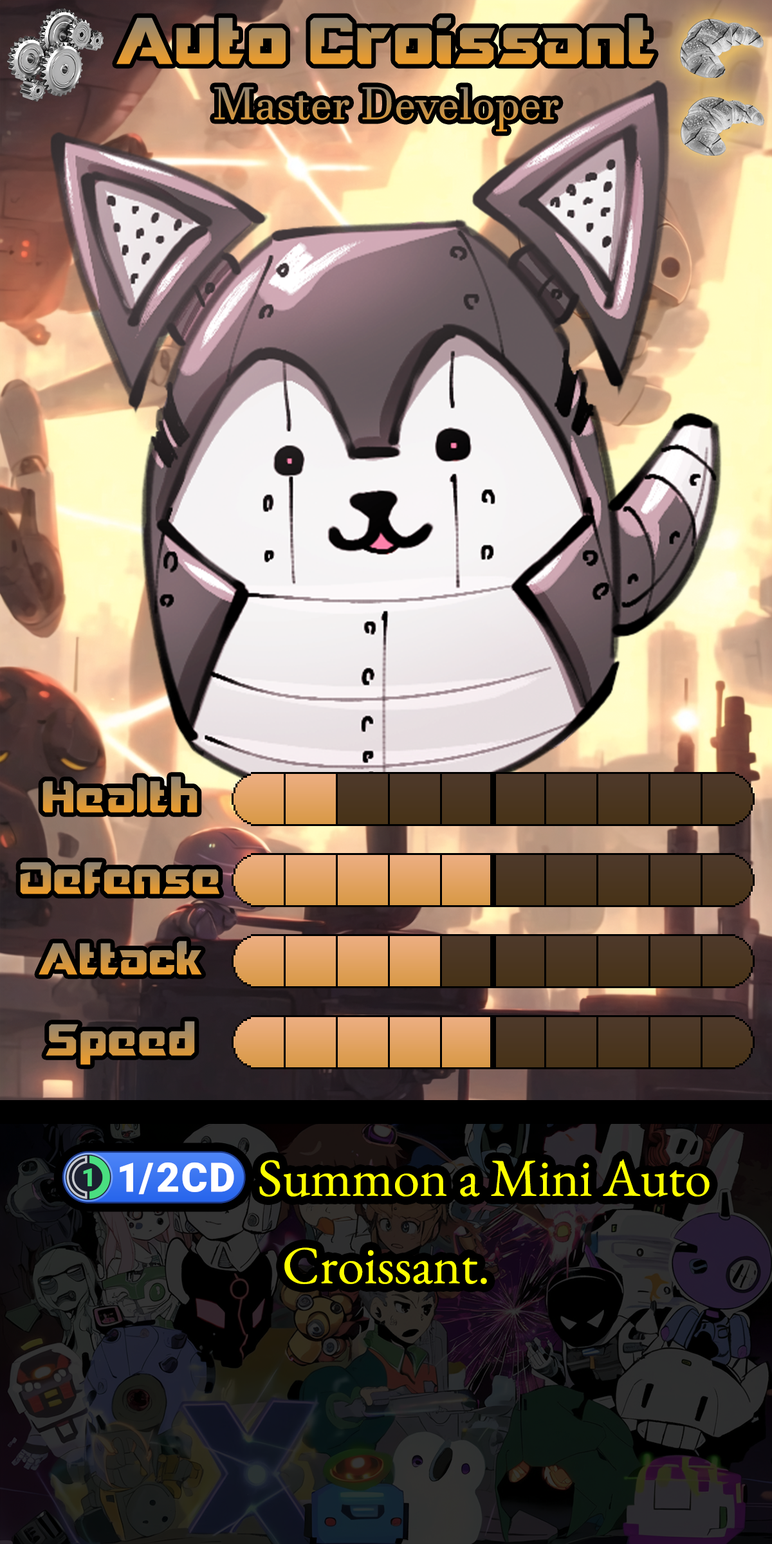
<style>
.page{position:relative;width:772px;height:1544px}
.page>*{position:absolute;margin:0}
.t1{font:112.6px "Mechanismo-Regular"}
.t2{font:76.3px "Mechanismo-Regular"}
.t3{font:77.3px "Mechanismo-Regular"}
.t4{font:91.4px "EBGaramond-Regular"}
.t5{font:91.4px "stoogedings-Regular"}
</style>
<div class="page">
<p class="t1" style="left:116px;top:17px;width:538px;height:47px">Auto Croissant</p>
<p class="t2" style="left:42px;top:777px;width:156px;height:36px">Health</p>
<p class="t3" style="left:20px;top:862px;width:200px;height:32px">Defense</p>
<p class="t2" style="left:39px;top:941px;width:163px;height:34px">Attack</p>
<p class="t2" style="left:46px;top:1021px;width:149px;height:44px">Speed</p>
<p class="t4" style="left:62px;top:1151px;width:648px;height:133px"><span class="t5">(1/2CD)</span> Summon a Mini Auto Croissant.</p>
</div>
